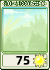
<style>
.page{position:relative;width:50px;height:70px}
.page>*{position:absolute;margin:0}
.t1{font:12.2px "AlibabaPuHuiTiB";color:#000000}
</style>
<div class="page">
<p class="t1" style="left:16px;top:56px;width:14px;height:9px">75</p>
</div>
